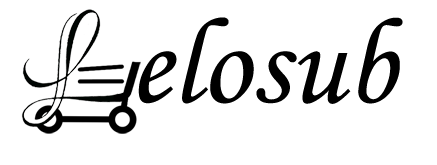
<style>
.page{position:relative;width:437px;height:165px;background:#ffffff}
.page>*{position:absolute;margin:0}
.t1{font:122.3px "MonotypeCorsiva";color:#000000}
</style>
<div class="page">
<p class="t1" style="left:138px;top:17px;width:265px;height:87px">elosub</p>
</div>
